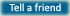
<style>
.page{position:relative;width:70px;height:16px;background:#06628d}
.page>*{position:absolute;margin:0}
.t1{font:11px "Calibri";color:#f7fafb}
</style>
<div class="page">
<p class="t1" style="left:9px;top:3px;width:52px;height:9px">Tell a friend</p>
</div>
